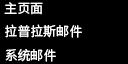
<style>
.page{position:relative;width:128px;height:64px;background:#000000}
.page>*{position:absolute;margin:0}
.t1{font:13px/23.5px "SourceHanSansSC-Regular";color:#ffffff}
</style>
<div class="page">
<p class="t1" style="left:4px;top:2px;width:78px;height:60px">主页面<br>拉普拉斯邮件<br>系统邮件</p>
</div>
